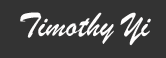
<style>
.page{position:relative;width:166px;height:58px;background:#333333}
.page>*{position:absolute;margin:0}
.t1{font:36px "BrushScriptMT";color:#fefdfd}
</style>
<div class="page">
<p class="t1" style="left:20px;top:12px;width:131px;height:34px">Timothy Yi</p>
</div>
